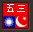
<style>
.page{position:relative;width:33px;height:32px;background:#f20000}
.page>*{position:absolute;margin:0}
.t1{font:10.4px "SimSun";color:#ffffff}
</style>
<div class="page">
<p class="t1" style="left:7px;top:4px;width:18px;height:8px">五三</p>
</div>
